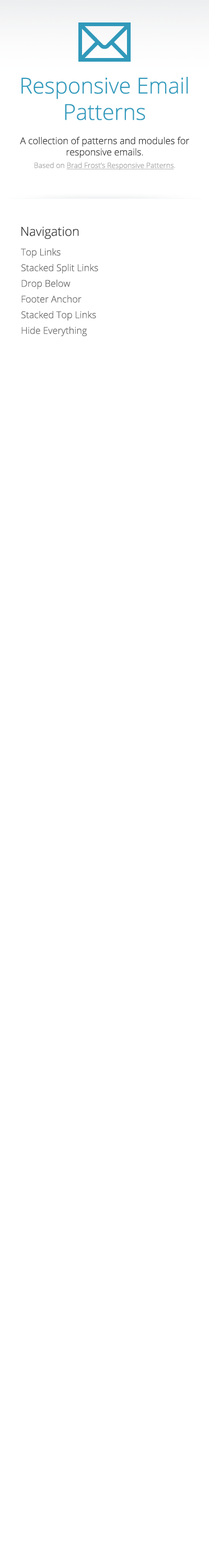
<style>
.page{position:relative;width:209px;height:1568px;background:#ffffff}
.page>*{position:absolute;margin:0}
.t1{font:22px "OpenSans-Light";color:#3299bb}
.t2{font:9.4px "OpenSans-Light";color:#333333}
.t3{font:7.3px/12.5px "OpenSans-Light";color:#a29f9f}
.t4{font:7.3px/12.5px "OpenSans-Light";color:#a29f9f;text-decoration:underline}
.t5{font:12.5px "OpenSans-Light";color:#333333}
.t6{font:9.4px/15.7px "OpenSans-Light";color:#666666}
</style>
<div class="page">
<p class="t1" style="left:21px;top:77px;width:167px;height:43px;text-align:center">Responsive Email Patterns</p>
<p class="t2" style="left:20px;top:136px;width:170px;height:34px;text-align:center">A collection of patterns and modules for responsive emails. <br><span class="t3">Based on </span><span class="t4">Brad Frost’s Responsive Patterns</span><span class="t3">.</span></p>
<p class="t5" style="left:21px;top:226px;width:58px;height:13px">Navigation</p>
<p class="t6" style="left:21px;top:248px;width:77px;height:89px">Top Links<br>Stacked Split Links<br>Drop Below<br>Footer Anchor<br>Stacked Top Links<br>Hide Everything</p>
</div>
